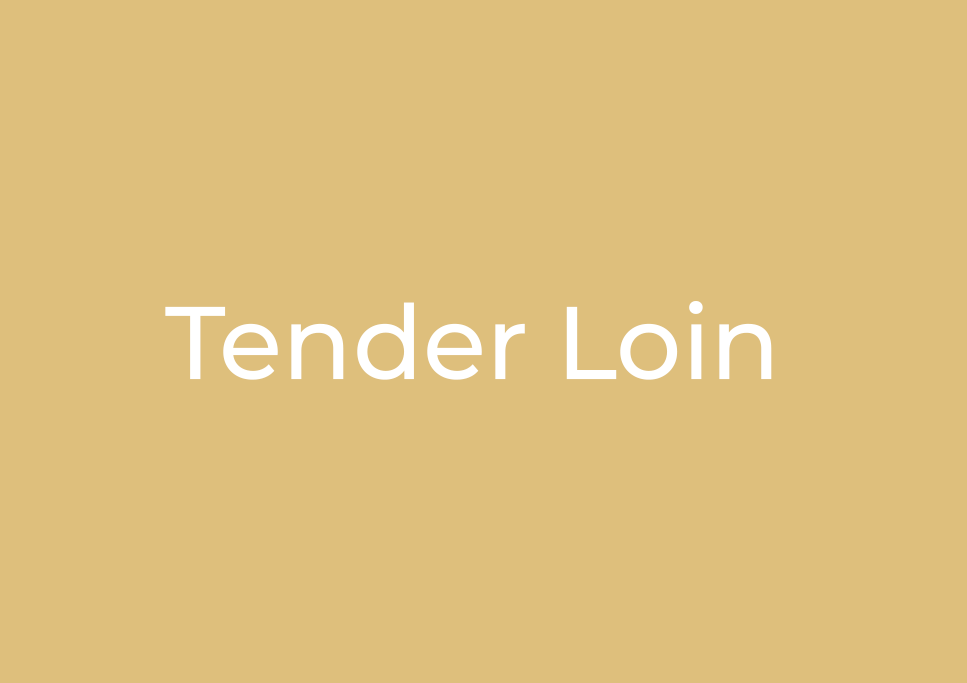
<style>
.page{position:relative;width:967px;height:683px;background:#debf7c}
.page>*{position:absolute;margin:0}
.t1{font:103px "MontserratRoman-Medium";color:#ffffff}
</style>
<div class="page">
<p class="t1" style="left:165px;top:301px;width:607px;height:79px">Tender Loin</p>
</div>
